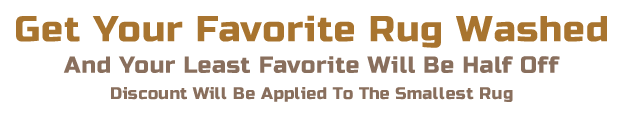
<style>
.page{position:relative;width:620px;height:120px;background:#ffffff}
.page>*{position:absolute;margin:0}
.t1{font:36.1px "RussoOne-Regular";letter-spacing:0.025em;color:#a8742f}
.t2{font:23.2px "RussoOne-Regular";letter-spacing:0.025em;color:#896f5d}
.t3{font:16.7px "RussoOne-Regular";letter-spacing:0.025em;color:#896f5d}
</style>
<div class="page">
<p class="t1" style="left:16px;top:15px;width:591px;height:33px">Get Your Favorite Rug Washed</p>
<p class="t2" style="left:63px;top:56px;width:497px;height:17px">And Your Least Favorite Will Be Half Off</p>
<p class="t3" style="left:111px;top:87px;width:402px;height:15px">Discount Will Be Applied To The Smallest Rug</p>
</div>
